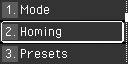
<style>
.page{position:relative;width:128px;height:64px;background:#333333}
.page>*{position:absolute;margin:0}
.t1{font:16px "PixelOperator";color:#ffffff}
</style>
<div class="page">
<p class="t1" style="left:6px;top:5px;width:9px;height:9px">1.</p>
<p class="t1" style="left:20px;top:5px;width:29px;height:9px">Mode</p>
<p class="t1" style="left:6px;top:27px;width:10px;height:9px">2.</p>
<p class="t1" style="left:20px;top:27px;width:41px;height:11px">Homing</p>
<p class="t1" style="left:6px;top:49px;width:10px;height:9px">3.</p>
<p class="t1" style="left:20px;top:49px;width:47px;height:9px">Presets</p>
</div>
